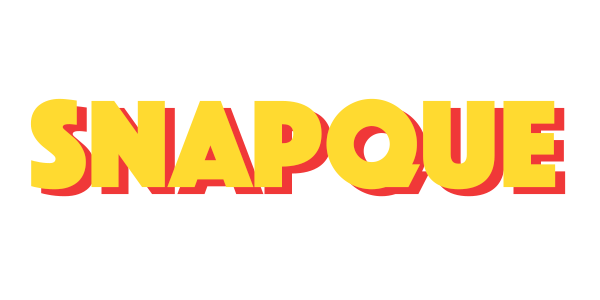
<style>
.page{position:relative;width:600px;height:300px;background:#ffffff}
.page>*{position:absolute;margin:0}
.t1{font:129px "Phosphate-Solid";color:#ffda30}
.t2{font:129px "Phosphate-Solid"}
</style>
<div class="page">
<p class="t1" style="left:30px;top:98px;width:526px;height:92px">SnapQue</p>
<p class="t2" style="left:40px;top:105px;width:526px;height:92px">SnapQue</p>
</div>
